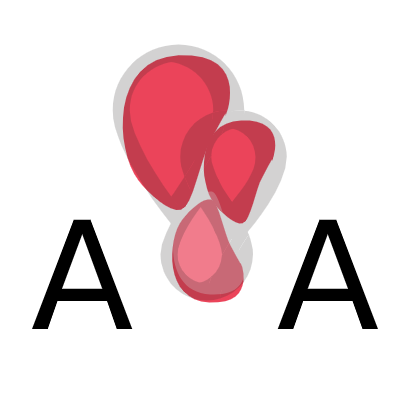
<style>
.page{position:relative;width:400px;height:400px;background:#ffffff}
.page>*{position:absolute;margin:0}
.t1{font:150px "DejaVuSans";color:#000000}
</style>
<div class="page">
<p class="t1" style="left:32px;top:219px;width:346px;height:110px">A   A</p>
</div>
